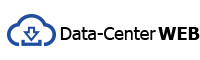
<style>
.page{position:relative;width:200px;height:60px;background:#ffffff}
.page>*{position:absolute;margin:0}
.t1{font:18px "Tahoma";color:#000000}
.t2{font:18px "Tahoma-Bold";color:#000000}
</style>
<div class="page">
<p class="t1" style="left:60px;top:27px;width:96px;height:13px">Data-Center</p>
<p class="t2" style="left:158px;top:27px;width:42px;height:13px">WEB</p>
</div>
